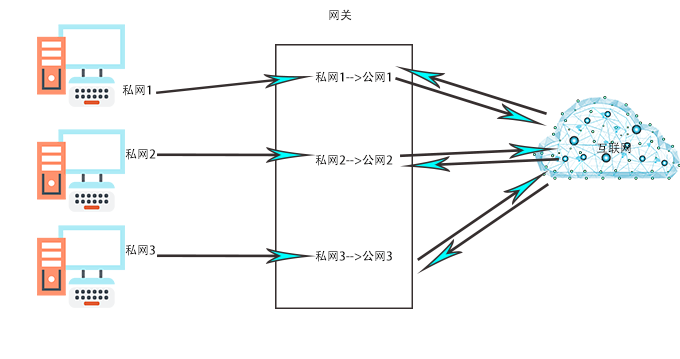
<style>
.page{position:relative;width:680px;height:359px;background:#ffffff}
.page>*{position:absolute;margin:0}
.t1{font:12px "AdobeHeitiStd-Regular";color:#0a0909}
</style>
<div class="page">
<p class="t1" style="left:329px;top:9px;width:23px;height:12px">网关</p>
<p class="t1" style="left:315px;top:71px;width:76px;height:12px">私网1--&gt;公网1</p>
<p class="t1" style="left:122px;top:84px;width:29px;height:12px">私网1</p>
<p class="t1" style="left:125px;top:148px;width:31px;height:12px">私网2</p>
<p class="t1" style="left:597px;top:142px;width:34px;height:12px">互联网</p>
<p class="t1" style="left:315px;top:154px;width:78px;height:12px">私网2--&gt;公网2</p>
<p class="t1" style="left:125px;top:244px;width:30px;height:12px">私网3</p>
<p class="t1" style="left:315px;top:250px;width:77px;height:12px">私网3--&gt;公网3</p>
</div>
